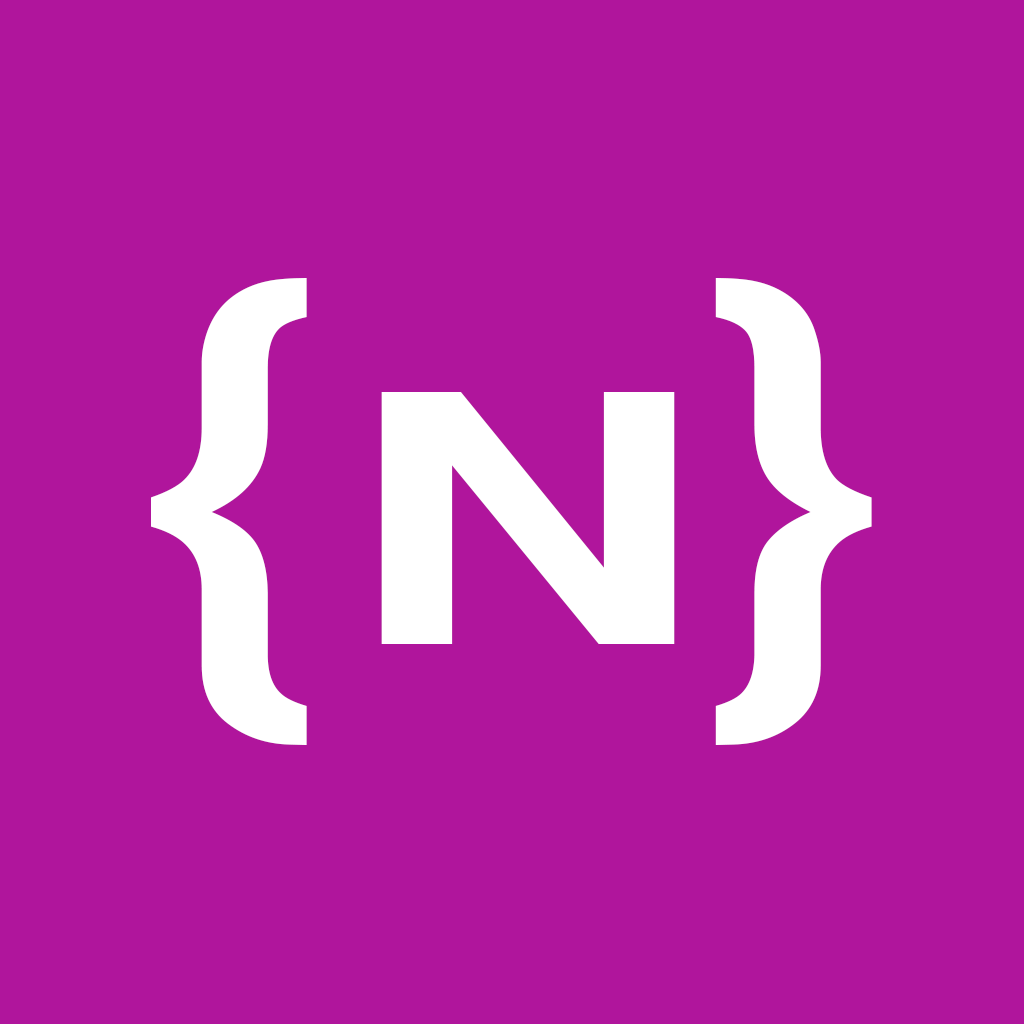
<style>
.page{position:relative;width:1024px;height:1024px;background:#b0159c}
.page>*{position:absolute;margin:0}
.t1{font:500px "Helvetica-Bold";color:#ffffff}
.t2{font:350px "Helvetica-Bold";color:#ffffff;scale:1.43 1}
.t3{font:500px "Helvetica-Bold";color:#ffffff;font-variant:small-caps}
</style>
<div class="page">
<p class="t1" style="left:151px;top:278px;width:721px;height:467px">{<span class="t2">N</span><span class="t3">}</span></p>
</div>
